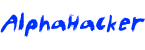
<style>
.page{position:relative;width:145px;height:50px;background:#ffffff}
.page>*{position:absolute;margin:0}
.t1{font:18px "KidTYPEPaint";color:#0030ff}
</style>
<div class="page">
<p class="t1" style="left:0px;top:12px;width:145px;height:25px">AlphaHacker</p>
</div>
